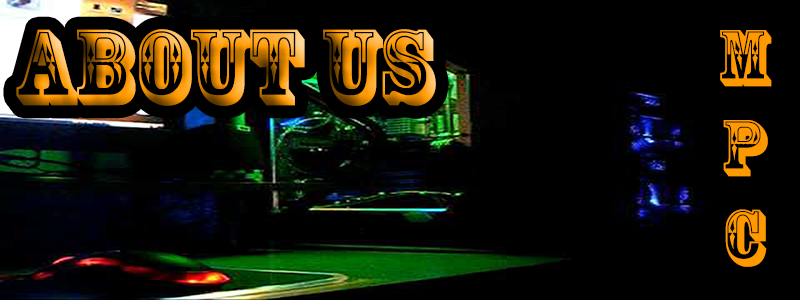
<style>
.page{position:relative;width:800px;height:300px;background:#000000}
.page>*{position:absolute;margin:0}
.t1{font:100px "RosewoodStd-Regular"}
.t2{font:75px "RosewoodStd-Regular";color:#ff9900}
</style>
<div class="page">
<p class="t1" style="left:16px;top:29px;width:420px;height:77px">About US</p>
<p class="t2" style="left:720px;top:30px;width:52px;height:237px;text-align:center">M<br>P<br>C</p>
</div>
